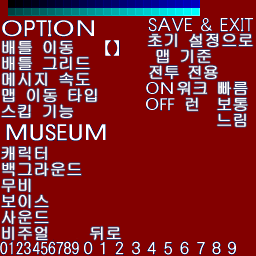
<style>
.page{position:relative;width:256px;height:256px;background:#830000}
.page>*{position:absolute;margin:0}
.t1{font:16px/16px "GulimChe";color:#ffffff;font-weight:bold}
.t2{font:16px/24px "GulimChe";color:#ffffff;font-weight:bold}
.t3{font:16px "GulimChe";color:#ffffff;font-weight:bold}
.t4{font:16px "GulimChe";letter-spacing:-0.05em;color:#ffffff;font-weight:bold}
</style>
<div class="page">
<p class="t1" style="left:1px;top:40px;width:96px;height:78px;text-align:justify"><span class="t2">배틀 이동<br></span>배틀 그리드<br>메시지 속도<br>맵 이동 타입<br>스킵 기능</p>
<p class="t3" style="left:148px;top:33px;width:105px;height:14px">초기 설정으로</p>
<p class="t3" style="left:156px;top:49px;width:55px;height:14px">맵 기준</p>
<p class="t4" style="left:149px;top:65px;width:69px;height:14px">전투 전용</p>
<p class="t4" style="left:177px;top:81px;width:30px;height:14px">워크</p>
<p class="t1" style="left:217px;top:81px;width:31px;height:46px;text-align:center">빠름<br>보통<br>느림</p>
<p class="t4" style="left:186px;top:97px;width:12px;height:14px">런</p>
<p class="t1" style="left:1px;top:146px;width:120px;height:94px;text-align:justify">캐릭터<br>백그라운드<br>무비<br>보이스<br>사운드<br>비주얼    뒤로</p>
</div>
